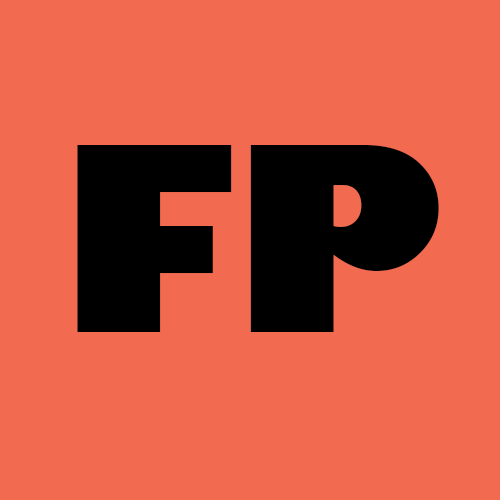
<style>
.page{position:relative;width:500px;height:500px;background:#f26b50}
.page>*{position:absolute;margin:0}
.t1{font:250.7px "GillSans-UltraBold";color:#000000}
</style>
<div class="page">
<p class="t1" style="left:77px;top:145px;width:362px;height:187px">FP</p>
</div>
